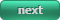
<style>
.page{position:relative;width:60px;height:20px}
.page>*{position:absolute;margin:0}
.t1{font:11px "Tahoma-Bold";color:#d1d3d5}
</style>
<div class="page">
<p class="t1" style="left:18px;top:6px;width:25px;height:8px">next</p>
</div>
